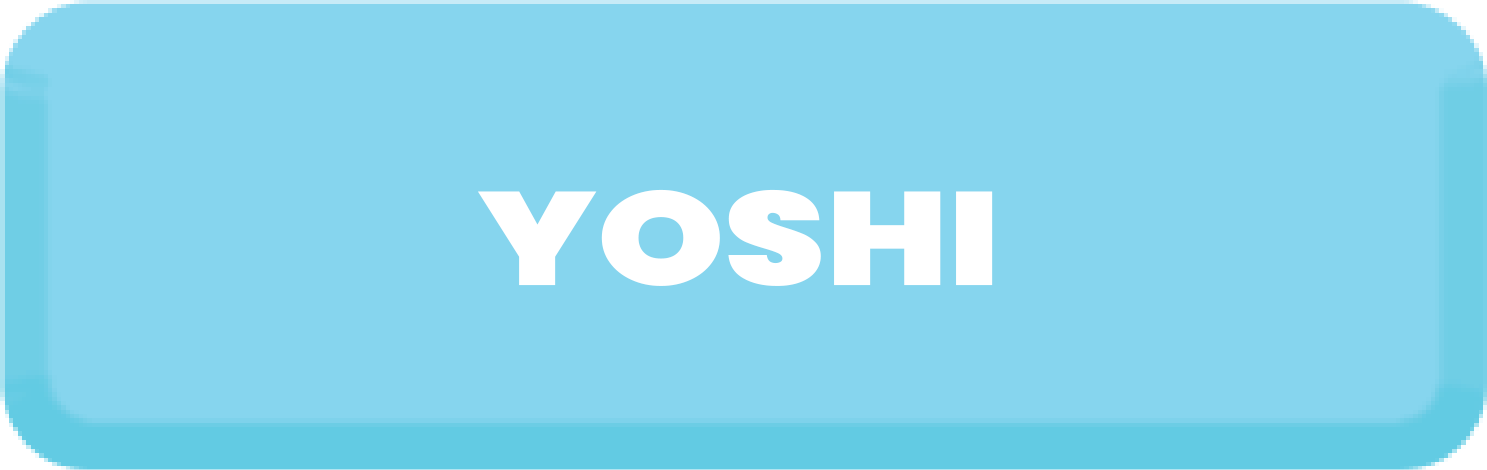
<style>
.page{position:relative;width:1487px;height:470px;background:#86d5ee}
.page>*{position:absolute;margin:0}
.t1{font:132px "Poppins-Black";color:#ffffff;scale:1.23 1}
</style>
<div class="page">
<p class="t1" style="left:478px;top:189px;width:515px;height:97px">YOSHI</p>
</div>
